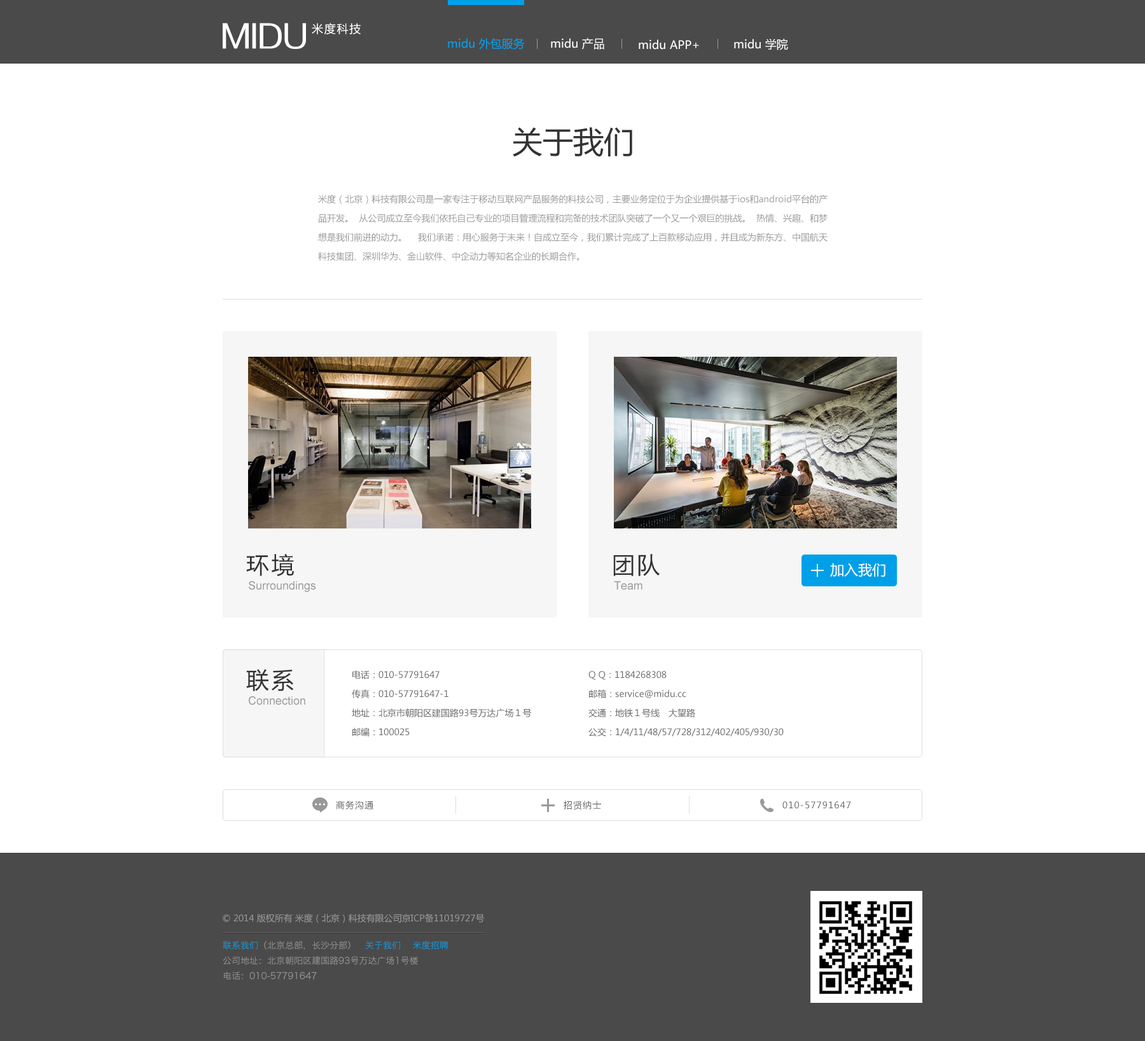
<style>
.page{position:relative;width:1145px;height:1041px;background:#ffffff}
.page>*{position:absolute;margin:0}
.t1{font:30.5px "FZZZHUNHJW--GB1-0";color:#ffffff}
.t2{font:11.5px "MicrosoftYaHei";letter-spacing:0.1em;color:#ffffff}
.t3{font:11.5px "MicrosoftYaHei";color:#00a0e9}
.t4{font:11.5px "MicrosoftYaHei";color:#ffffff}
.t5{font:30.5px "MicrosoftYaHei";color:#333333}
.t6{font:8.9px/19.1px "MicrosoftYaHei";color:#999999}
.t7{font:22.9px "MicrosoftYaHei";letter-spacing:0.1em;color:#333333}
.t8{font:14px "MicrosoftYaHei";color:#ffffff}
.t9{font:11.5px "ArialMT";color:#999999}
.t10{font:8.9px/19.1px "MicrosoftYaHei";color:#666666}
.t11{font:8.9px "MicrosoftYaHei";letter-spacing:0.075em;color:#666666}
.t12{font:8.9px "MicrosoftYaHei";color:#999999}
.t13{font:8.9px/15.3px "HiraginoSansGB-W3";color:#999999}
.t14{font:8.9px/15.3px "HiraginoSansGB-W3";color:#00a0e9}
</style>
<div class="page">
<p class="t1" style="left:223px;top:23px;width:83px;height:26px">MIDU</p>
<p class="t2" style="left:312px;top:23px;width:49px;height:11px">米度科技</p>
<p class="t3" style="left:448px;top:38px;width:77px;height:12px">midu 外包服务</p>
<p class="t4" style="left:551px;top:38px;width:53px;height:12px">midu 产品</p>
<p class="t4" style="left:639px;top:39px;width:60px;height:11px">midu APP+</p>
<p class="t4" style="left:734px;top:38px;width:54px;height:12px">midu 学院</p>
<p class="t5" style="left:513px;top:127px;width:119px;height:30px">关于我们</p>
<p class="t6" style="left:318px;top:195px;width:510px;height:66px;text-align:justify">米度（北京）科技有限公司是一家专注于移动互联网产品服务的科技公司，主要业务定位于为企业提供基于ios和android平台的产品开发。 从公司成立至今我们依托自己专业的项目管理流程和完备的技术团队突破了一个又一个艰巨的挑战。 热情、兴趣、和梦想是我们前进的动力。 我们承诺：用心服务于未来！自成立至今，我们累计完成了上百款移动应用，并且成为新东方、中国航天科技集团、深圳华为、金山软件、中企动力等知名企业的长期合作。</p>
<p class="t7" style="left:246px;top:554px;width:48px;height:22px">环境</p>
<p class="t7" style="left:613px;top:554px;width:47px;height:22px">团队</p>
<p class="t8" style="left:830px;top:563px;width:56px;height:14px">加入我们</p>
<p class="t9" style="left:249px;top:581px;width:67px;height:11px">Surroundings</p>
<p class="t9" style="left:614px;top:581px;width:29px;height:9px">Team</p>
<p class="t7" style="left:246px;top:669px;width:48px;height:22px">联系</p>
<p class="t10" style="left:352px;top:670px;width:180px;height:67px;text-align:justify">电话：010-57791647<br>传真：010-57791647-1<br>地址：北京市朝阳区建国路93号万达广场１号<br>邮编：100025</p>
<p class="t10" style="left:588px;top:671px;width:196px;height:66px;text-align:justify">Q Q：1184268308<br>邮箱：service@midu.cc<br>交通：地铁１号线　大望路<br>公交：1/4/11/48/57/728/312/402/405/930/30</p>
<p class="t9" style="left:249px;top:696px;width:56px;height:9px">Connection</p>
<p class="t11" style="left:336px;top:801px;width:37px;height:9px">商务沟通</p>
<p class="t11" style="left:564px;top:801px;width:37px;height:9px">招贤纳士</p>
<p class="t11" style="left:782px;top:802px;width:69px;height:7px">010-57791647</p>
<p class="t12" style="left:223px;top:914px;width:262px;height:10px">© 2014 版权所有 米度（北京）科技有限公司京ICP备11019727号</p>
<p class="t13" style="left:223px;top:941px;width:225px;height:39px"><span class="t14">联系我们</span>（北京总部，长沙分部）   <span class="t14">关于我们    米度招聘<br></span>公司地址：北京朝阳区建国路93号万达广场1号楼     <br>电话：010-57791647</p>
</div>
